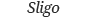
<style>
.page{position:relative;width:87px;height:17px;background:#ffffff}
.page>*{position:absolute;margin:0}
.t1{font:14.8px "DroidSerif-Italic";color:#292929}
</style>
<div class="page">
<p class="t1" style="left:27px;top:1px;width:33px;height:16px">Sligo</p>
</div>
